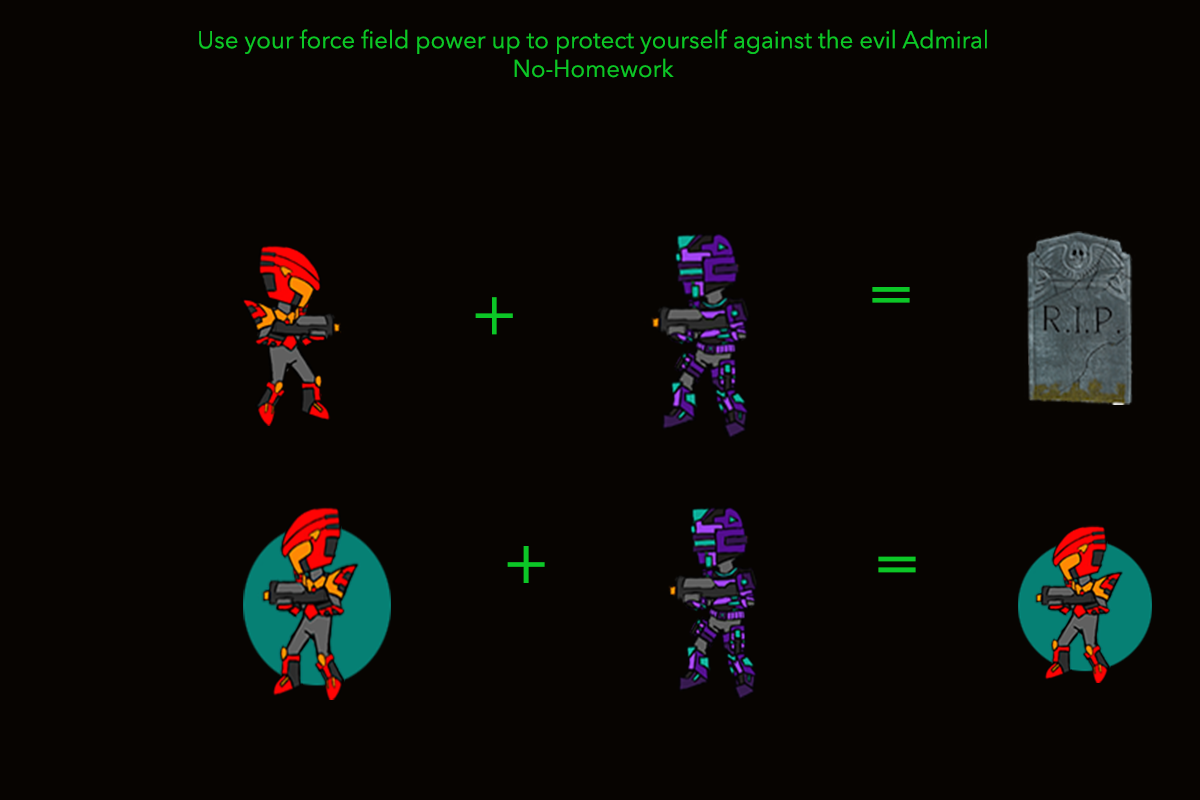
<style>
.page{position:relative;width:1200px;height:800px;background:#070401}
.page>*{position:absolute;margin:0}
.t1{font:24px "AvenirNext-Regular";color:#0cc727}
.t2{font:72px "AvenirNext-Regular";color:#0cc727}
</style>
<div class="page">
<p class="t1" style="left:199px;top:29px;width:788px;height:49px;text-align:center">Use your force field power up to protect yourself against the evil Admiral No-Homework</p>
<p class="t2" style="left:872px;top:287px;width:38px;height:16px">=</p>
<p class="t2" style="left:475px;top:297px;width:38px;height:38px">+</p>
<p class="t2" style="left:507px;top:546px;width:38px;height:37px">+</p>
<p class="t2" style="left:878px;top:556px;width:38px;height:17px">=</p>
</div>
